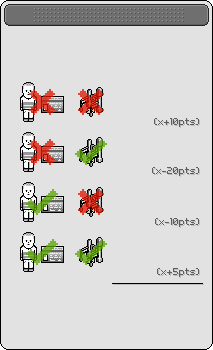
<style>
.page{position:relative;width:213px;height:350px;background:#e2e2e2}
.page>*{position:absolute;margin:0}
.t1{font:9px "VolterGoldfish";color:#5e5e5e}
</style>
<div class="page">
<p class="t1" style="left:154px;top:118px;width:45px;height:9px">(x+10pts)</p>
<p class="t1" style="left:152px;top:167px;width:47px;height:9px">(x-20pts)</p>
<p class="t1" style="left:155px;top:218px;width:44px;height:9px">(x-10pts)</p>
<p class="t1" style="left:157px;top:268px;width:42px;height:9px">(x+5pts)</p>
</div>
